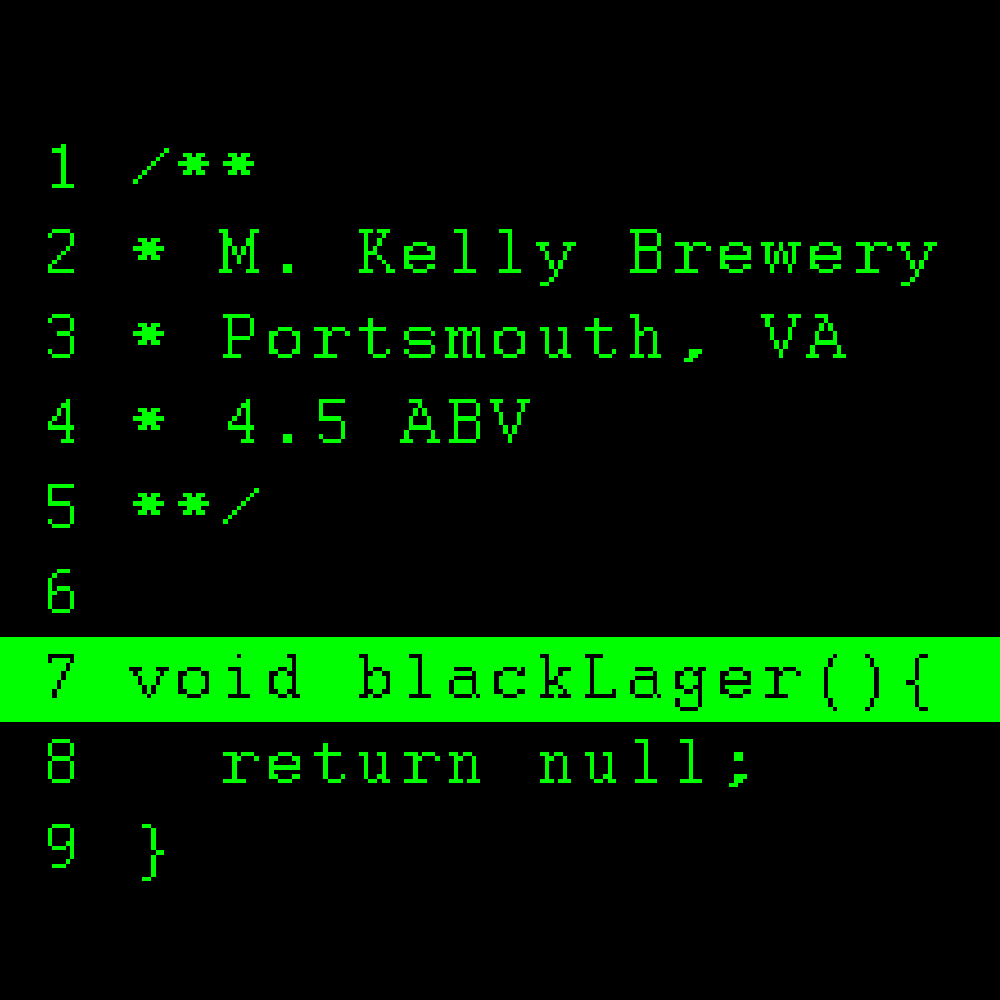
<style>
.page{position:relative;width:1000px;height:1000px;background:#000000}
.page>*{position:absolute;margin:0}
.t1{font:70.8px "Courier";letter-spacing:0.075em;color:#00ff00}
.t2{font:70.8px "Courier";letter-spacing:0.075em;color:#000000}
</style>
<div class="page">
<p class="t1" style="left:48px;top:144px;width:889px;height:737px">1 /**<br>2 * M. Kelly Brewery<br>3 * Portsmouth, VA<br>4 * 4.5 ABV<br>5 **/<br>6<br><span class="t2">7 void blackLager(){<br></span>8   return null;<br>9 }</p>
</div>
